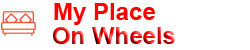
<style>
.page{position:relative;width:250px;height:50px;background:#ffffff}
.page>*{position:absolute;margin:0}
.t1{font:24px "Arial-BoldMT";color:#ff0000}
.t2{font:24px "Arial-BoldMT"}
</style>
<div class="page">
<p class="t1" style="left:54px;top:3px;width:101px;height:22px">My Place</p>
<p class="t2" style="left:53px;top:27px;width:122px;height:17px">On Wheels</p>
</div>
